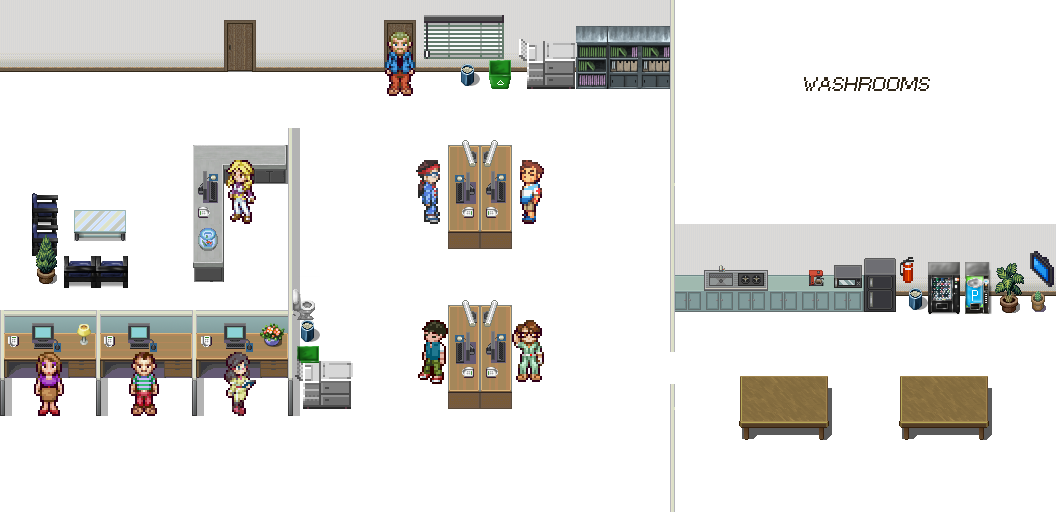
<style>
.page{position:relative;width:1056px;height:512px;background:#ffffff}
.page>*{position:absolute;margin:0}
.t1{font:18px "Small Fonts";color:#322819;text-transform:uppercase;font-style:italic}
</style>
<div class="page">
<p class="t1" style="left:804px;top:77px;width:126px;height:14px">Washrooms</p>
</div>
